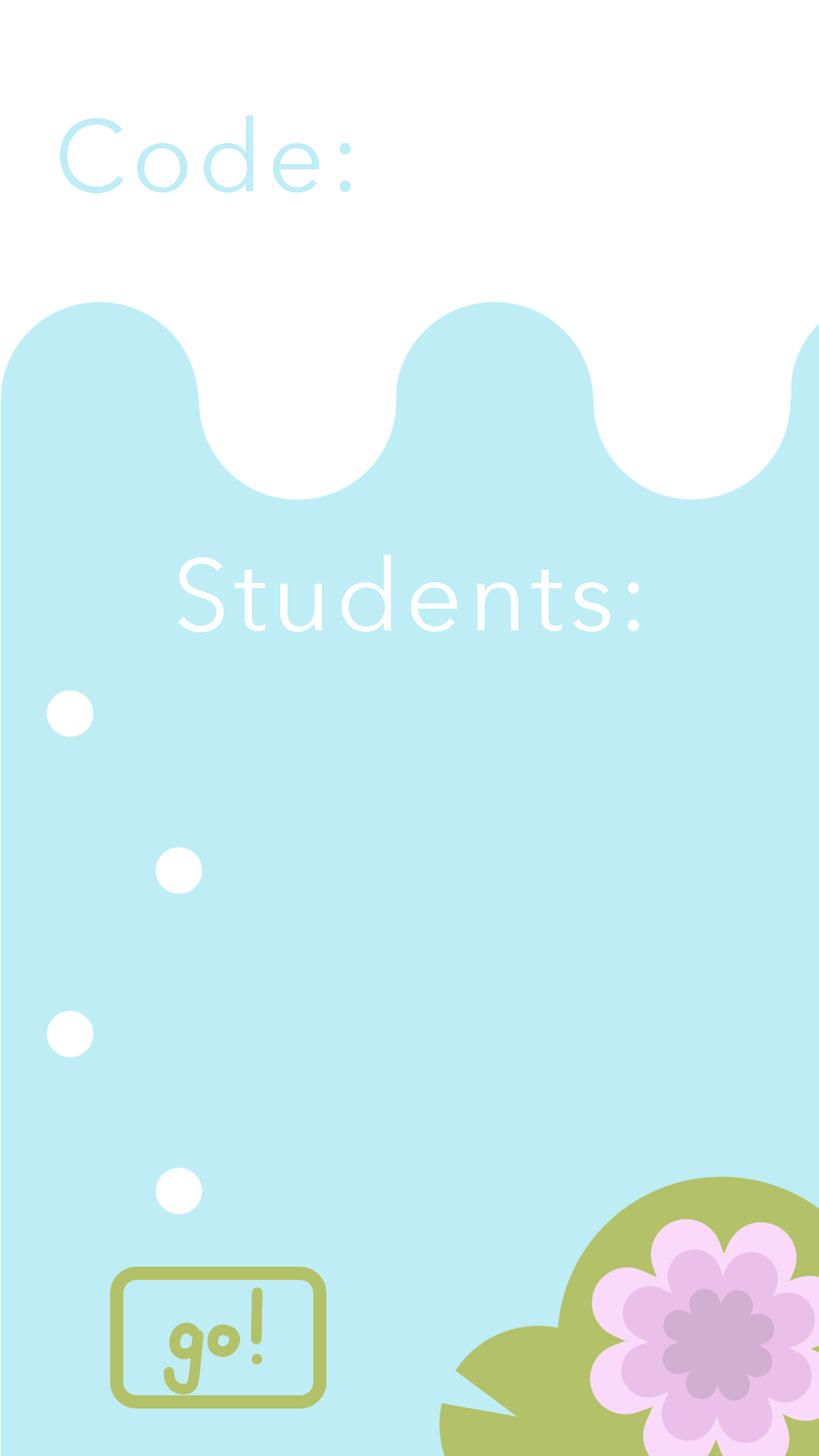
<style>
.page{position:relative;width:819px;height:1456px;background:#beedf5}
.page>*{position:absolute;margin:0}
.t1{font:101.2px "AvenirNext-Regular";letter-spacing:0.05em;color:#beedf5}
.t2{font:101.2px "AvenirNext-Regular";letter-spacing:0.05em;color:#ffffff}
</style>
<div class="page">
<p class="t1" style="left:60px;top:115px;width:291px;height:78px">Code:</p>
<p class="t2" style="left:178px;top:555px;width:461px;height:77px">Students:</p>
</div>
